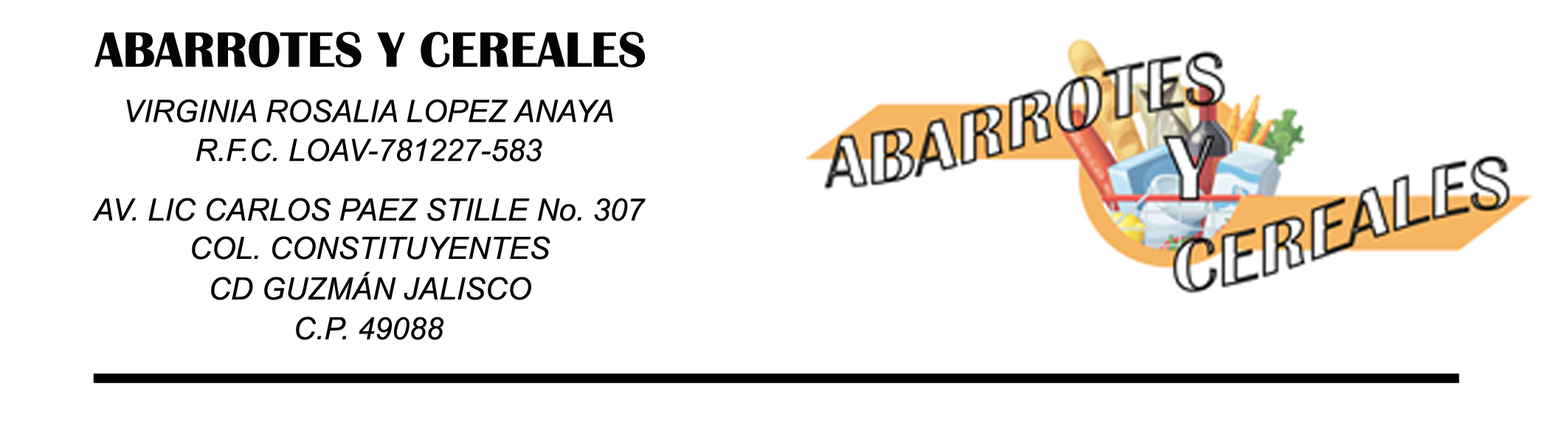
<style>
.page{position:relative;width:1568px;height:436px;background:#ffffff}
.page>*{position:absolute;margin:0}
.t1{font:51.3px "BritannicBold";color:#040404}
.t2{font:30.8px "Arial-ItalicMT";color:#040404}
</style>
<div class="page">
<p class="t1" style="left:94px;top:32px;width:551px;height:36px">ABARROTES Y CEREALES</p>
<p class="t2" style="left:126px;top:99px;width:487px;height:23px">VIRGINIA ROSALIA LOPEZ ANAYA</p>
<p class="t2" style="left:196px;top:138px;width:346px;height:24px">R.F.C. LOAV-781227-583</p>
<p class="t2" style="left:92px;top:198px;width:554px;height:23px">AV. LIC CARLOS PAEZ STILLE No. 307</p>
<p class="t2" style="left:192px;top:236px;width:358px;height:24px">COL. CONSTITUYENTES</p>
<p class="t2" style="left:211px;top:272px;width:320px;height:28px">CD GUZMÁN JALISCO</p>
<p class="t2" style="left:296px;top:317px;width:147px;height:23px">C.P. 49088</p>
</div>
